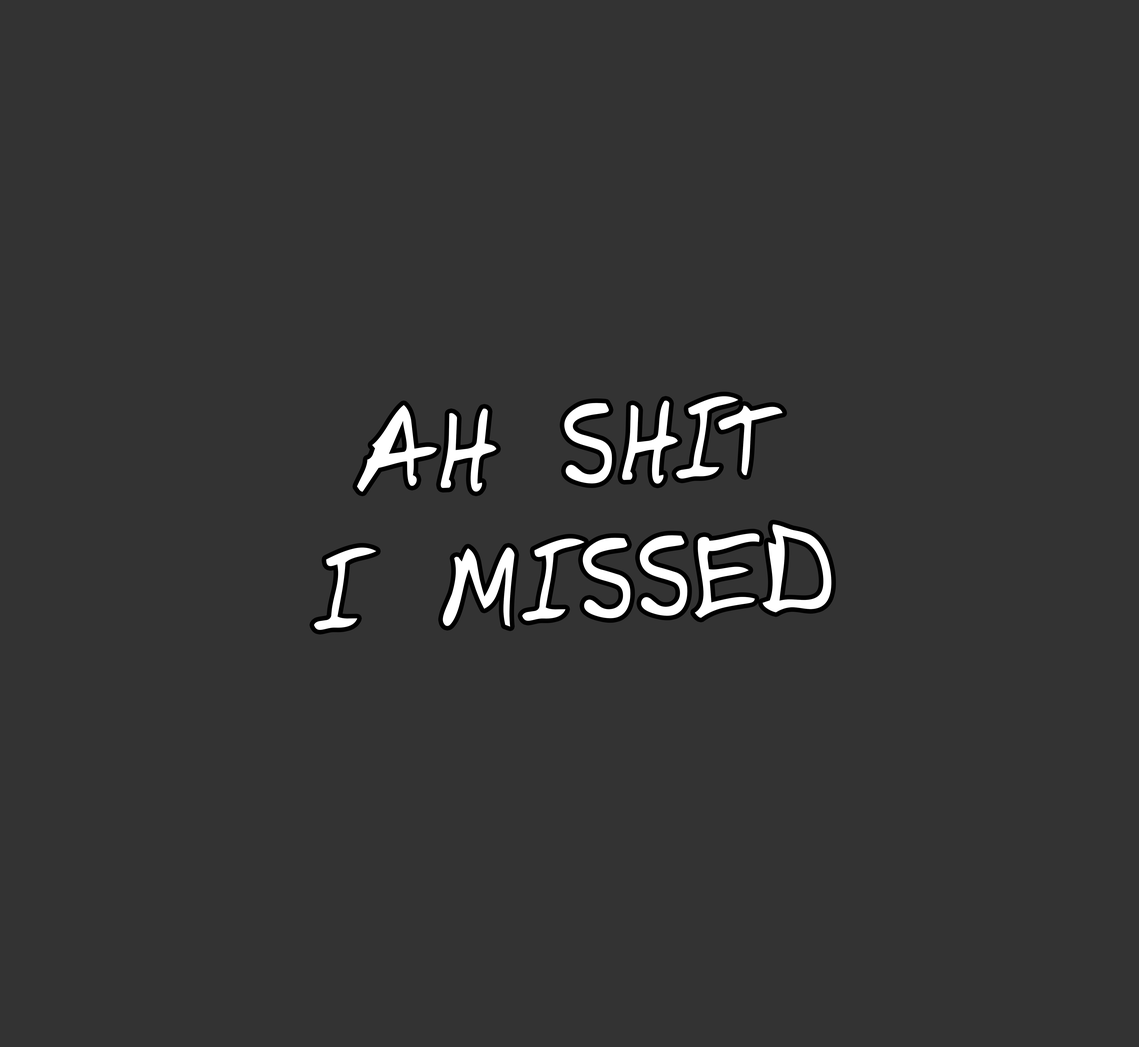
<style>
.page{position:relative;width:1139px;height:1047px;background:#333333}
.page>*{position:absolute;margin:0}
.t1{font:113px "DomesticManners";letter-spacing:0.04em;color:#ffffff}
</style>
<div class="page">
<p class="t1" style="left:314px;top:396px;width:517px;height:234px;text-align:center;rotate:-2deg">AH SHIT<br>I MISSED</p>
</div>
